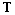
<style>
.page{position:relative;width:15px;height:15px;background:#ffffff}
.page>*{position:absolute;margin:0}
.t1{font:15px "TimesNewRomanPS-BoldMT";color:#000000}
</style>
<div class="page">
<p class="t1" style="left:3px;top:2px;width:8px;height:10px">T</p>
</div>
